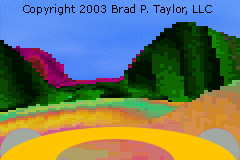
<style>
.page{position:relative;width:240px;height:160px}
.page>*{position:absolute;margin:0}
.t1{font:11px "Verdana";color:#000000}
</style>
<div class="page">
<p class="t1" style="left:23px;top:4px;width:189px;height:11px">Copyright 2003 Brad P. Taylor, LLC</p>
</div>
